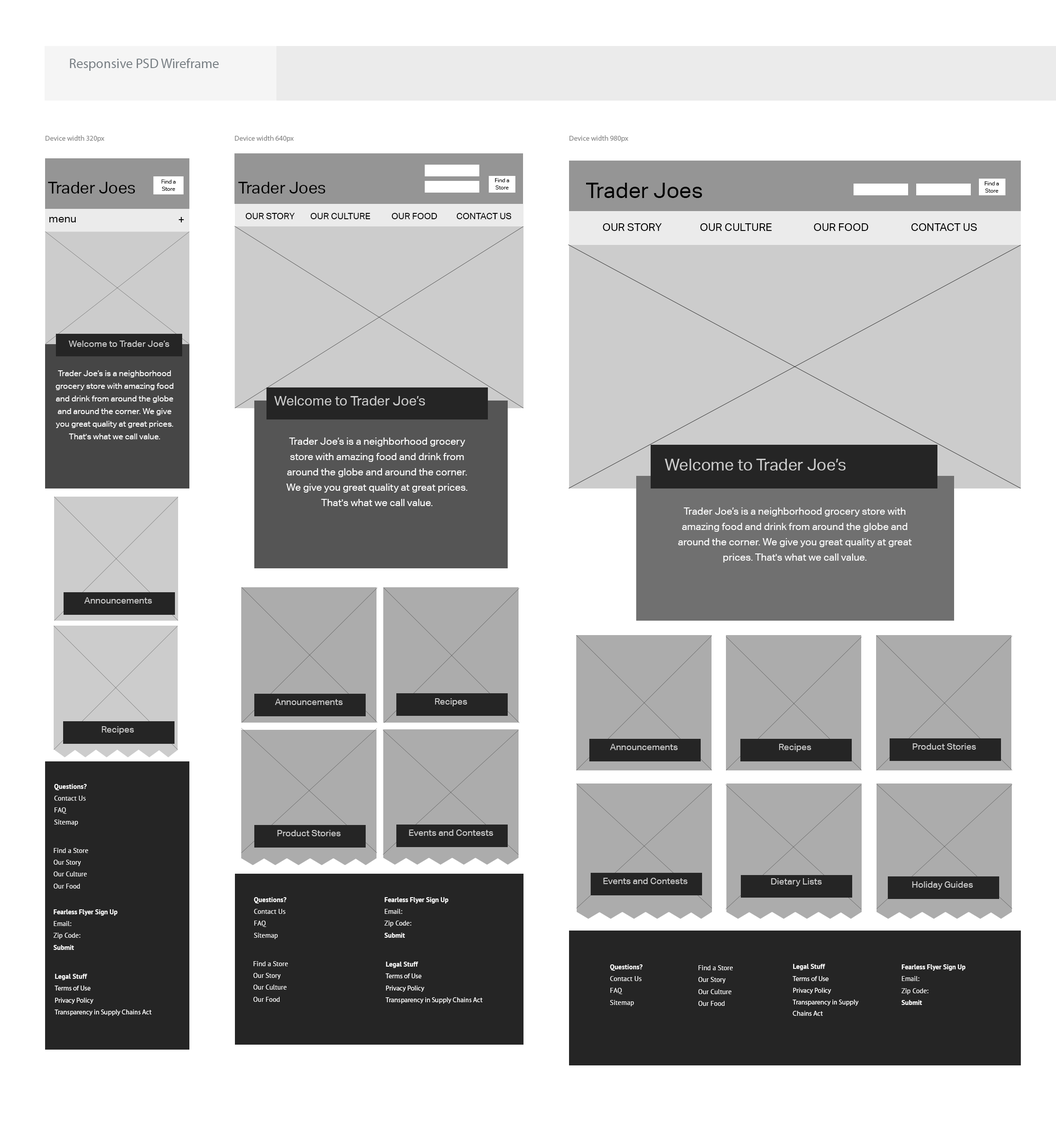
<style>
.page{position:relative;width:1056px;height:1129px;background:#ffffff}
.page>*{position:absolute;margin:0}
.t1{font:13.5px "MyriadPro-Regular";color:#787f84}
.t2{font:7.2px "MyriadPro-Regular";color:#878787}
.t3{font:16.2px "AktivGrotesk-Regular";color:#000000}
.t4{font:5.4px/6.3px "AktivGrotesk-Regular";color:#000000}
.t5{font:21.6px "AktivGrotesk-Regular";color:#000000}
.t6{font:10.8px "AktivGrotesk-Regular";color:#000000}
.t7{font:9px "AktivGrotesk-Regular";color:#000000}
.t8{font:9px "AktivGrotesk-Regular";color:#cccccc}
.t9{font:8.1px/12.6px "AktivGrotesk-Regular";color:#ffffff}
.t10{font:13.5px "AktivGrotesk-Regular";color:#cccccc}
.t11{font:9.9px/15.3px "AktivGrotesk-Regular";color:#ffffff}
.t12{font:16.2px "AktivGrotesk-Regular";color:#cccccc}
.t13{font:6.9px/11.3px "PTSans-Regular";color:#ffffff}
.t14{font:6.9px/11.3px "PTSans-Bold";color:#ffffff}
.t15{font:6.8px/11.3px "PTSans-Regular";color:#ffffff}
.t16{font:6.8px/11.3px "PTSans-Bold";color:#ffffff}
.t17{font:6.8px/11.3px "MyriadPro-Regular";color:#ffffff}
</style>
<div class="page">
<p class="t1" style="left:70px;top:58px;width:149px;height:13px">Responsive PSD Wireframe</p>
<p class="t2" style="left:46px;top:135px;width:59px;height:7px">Device width 320px</p>
<p class="t2" style="left:235px;top:135px;width:59px;height:7px">Device width 640px</p>
<p class="t2" style="left:570px;top:135px;width:59px;height:7px">Device width 980px</p>
<p class="t3" style="left:48px;top:182px;width:87px;height:11px">Trader Joes</p>
<p class="t4" style="left:161px;top:180px;width:15px;height:11px;text-align:center">Find a <br>Store</p>
<p class="t3" style="left:238px;top:182px;width:88px;height:11px">Trader Joes</p>
<p class="t4" style="left:495px;top:178px;width:14px;height:11px;text-align:center">Find a <br>Store</p>
<p class="t5" style="left:586px;top:183px;width:116px;height:15px">Trader Joes</p>
<p class="t4" style="left:985px;top:181px;width:14px;height:12px;text-align:center">Find a <br>Store</p>
<p class="t6" style="left:49px;top:217px;width:27px;height:5px">menu</p>
<p class="t6" style="left:179px;top:217px;width:5px;height:5px">+</p>
<p class="t7" style="left:246px;top:213px;width:265px;height:6px">OUR STORY  OUR CULTURE   OUR FOOD   CONTACT US</p>
<p class="t6" style="left:603px;top:223px;width:374px;height:8px">OUR STORY   OUR CULTURE    OUR FOOD    CONTACT US</p>
<p class="t8" style="left:69px;top:341px;width:101px;height:6px">Welcome to Trader Joe’s</p>
<p class="t9" style="left:55px;top:370px;width:119px;height:69px;text-align:center">Trader Joe’s is a neighborhood grocery store with amazing food and drink from around the globe and around the corner. We give you great quality at great prices. That's what we call value.</p>
<p class="t10" style="left:274px;top:396px;width:151px;height:9px">Welcome to Trader Joe’s</p>
<p class="t11" style="left:286px;top:437px;width:182px;height:69px;text-align:center">Trader Joe’s is a neighborhood grocery store with amazing food and drink from around the globe and around the corner. We give you great quality at great prices. That's what we call value.</p>
<p class="t12" style="left:665px;top:459px;width:181px;height:11px">Welcome to Trader Joe’s</p>
<p class="t11" style="left:678px;top:507px;width:234px;height:55px;text-align:center">Trader Joe’s is a neighborhood grocery store with amazing food and drink from around the globe and around the corner. We give you great quality at great prices. That's what we call value.</p>
<p class="t8" style="left:84px;top:597px;width:68px;height:6px">Announcements</p>
<p class="t8" style="left:275px;top:699px;width:68px;height:6px">Announcements</p>
<p class="t8" style="left:435px;top:698px;width:32px;height:8px">Recipes</p>
<p class="t8" style="left:102px;top:726px;width:32px;height:8px">Recipes</p>
<p class="t8" style="left:610px;top:744px;width:68px;height:6px">Announcements</p>
<p class="t8" style="left:779px;top:744px;width:32px;height:8px">Recipes</p>
<p class="t8" style="left:913px;top:743px;width:63px;height:7px">Product Stories</p>
<p class="t13" style="left:54px;top:784px;width:33px;height:42px"><span class="t14">Questions?<br></span>Contact Us<br>FAQ<br>Sitemap</p>
<p class="t8" style="left:277px;top:830px;width:64px;height:6px">Product Stories</p>
<p class="t8" style="left:409px;top:829px;width:84px;height:7px">Events and Contests</p>
<p class="t15" style="left:54px;top:848px;width:34px;height:41px">Find a Store<br>Our Story<br>Our Culture<br>Our Food</p>
<p class="t8" style="left:603px;top:878px;width:85px;height:6px">Events and Contests</p>
<p class="t8" style="left:771px;top:878px;width:51px;height:8px">Dietary Lists</p>
<p class="t8" style="left:912px;top:881px;width:61px;height:8px">Holiday Guides</p>
<p class="t13" style="left:254px;top:897px;width:32px;height:42px"><span class="t14">Questions?<br></span>Contact Us<br>FAQ<br>Sitemap</p>
<p class="t16" style="left:384px;top:897px;width:65px;height:41px">Fearless Flyer Sign Up<br><span class="t15">Email:<br>Zip Code:<br></span>Submit<br><span class="t15">Sug</span></p>
<p class="t16" style="left:53px;top:909px;width:65px;height:41px">Fearless Flyer Sign Up<br><span class="t15">Email:<br>Zip Code:<br></span>Submit<br><span class="t15">Sug</span></p>
<p class="t15" style="left:253px;top:961px;width:35px;height:41px">Find a Store<br>Our Story<br>Our Culture<br>Our Food</p>
<p class="t17" style="left:386px;top:962px;width:97px;height:42px"><span class="t14">Legal Stuff<br></span>Terms of Use<br>Privacy Policy<br>Transparency in Supply Chains Act</p>
<p class="t13" style="left:610px;top:964px;width:33px;height:42px"><span class="t14">Questions?<br></span>Contact Us<br>FAQ<br>Sitemap</p>
<p class="t15" style="left:699px;top:965px;width:34px;height:41px">Find a Store<br>Our Story<br>Our Culture<br>Our Food</p>
<p class="t17" style="left:793px;top:964px;width:66px;height:52px"><span class="t14">Legal Stuff<br></span>Terms of Use<br>Privacy Policy<br>Transparency in Supply Chains Act</p>
<p class="t16" style="left:902px;top:964px;width:64px;height:41px">Fearless Flyer Sign Up<br><span class="t15">Email:<br>Zip Code:<br></span>Submit<br><span class="t15">Sug</span></p>
<p class="t17" style="left:55px;top:974px;width:97px;height:42px"><span class="t14">Legal Stuff<br></span>Terms of Use<br>Privacy Policy<br>Transparency in Supply Chains Act</p>
</div>
